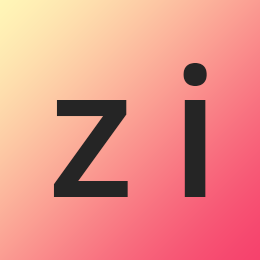
<style>
.page{position:relative;width:260px;height:260px}
.page>*{position:absolute;margin:0}
.t1{font:180px "OpenSans-SemiBold";letter-spacing:0.2em;color:#252525}
</style>
<div class="page">
<p class="t1" style="left:53px;top:63px;width:154px;height:134px">zi</p>
</div>
